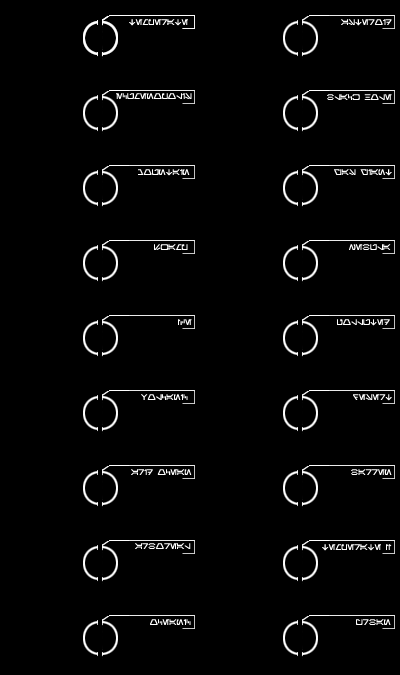
<style>
.page{position:relative;width:400px;height:675px;background:#000000}
.page>*{position:absolute;margin:0}
.t1{font:8px "Aurebesh";color:#ffffff}
</style>
<div class="page">
<p class="t1" style="left:129px;top:19px;width:59px;height:7px">Temperate</p>
<p class="t1" style="left:341px;top:19px;width:51px;height:7px">Asteroid</p>
<p class="t1" style="left:116px;top:93px;width:76px;height:6px">Ecumenopolis</p>
<p class="t1" style="left:327px;top:94px;width:65px;height:6px">Black Hole</p>
<p class="t1" style="left:138px;top:169px;width:52px;height:7px">Mountain</p>
<p class="t1" style="left:334px;top:169px;width:58px;height:7px">Gas Giant</p>
<p class="t1" style="left:154px;top:244px;width:34px;height:6px">Swamp</p>
<p class="t1" style="left:349px;top:244px;width:42px;height:6px">Nebula</p>
<p class="t1" style="left:178px;top:319px;width:14px;height:6px">ICe</p>
<p class="t1" style="left:337px;top:319px;width:53px;height:7px">Polluted</p>
<p class="t1" style="left:141px;top:394px;width:47px;height:6px">Volcanic</p>
<p class="t1" style="left:353px;top:394px;width:39px;height:7px">Desert</p>
<p class="t1" style="left:131px;top:469px;width:61px;height:6px">Arid Ocean</p>
<p class="t1" style="left:351px;top:469px;width:41px;height:6px">Barren</p>
<p class="t1" style="left:135px;top:543px;width:56px;height:6px">Arboreal</p>
<p class="t1" style="left:322px;top:544px;width:70px;height:7px">Temperate II</p>
<p class="t1" style="left:150px;top:619px;width:41px;height:6px">Oceanic</p>
<p class="t1" style="left:356px;top:619px;width:35px;height:6px">Urban</p>
</div>
